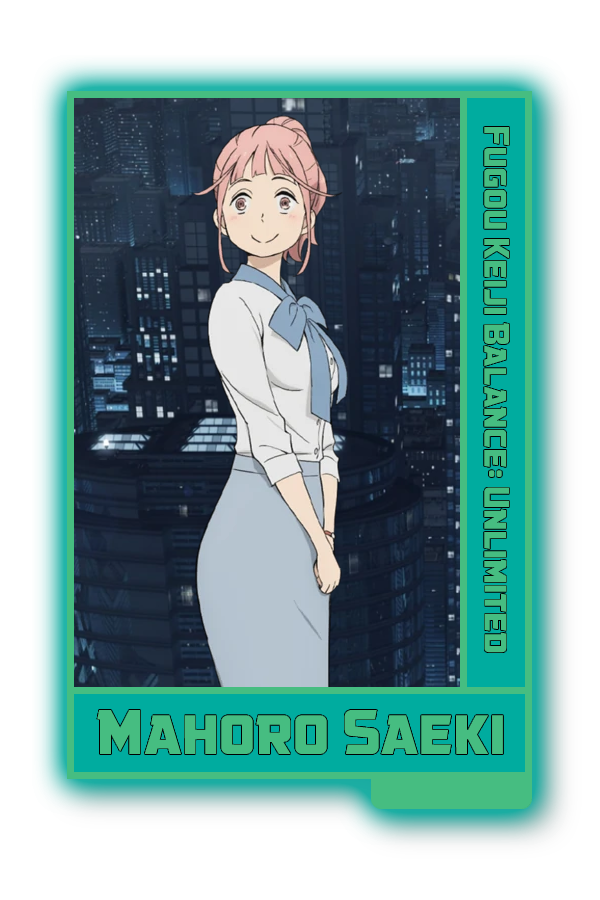
<style>
.page{position:relative;width:600px;height:900px;background:#ffffff}
.page>*{position:absolute;margin:0}
.t1{font:37.3px "GovernmentAgentBB";color:#46bd81}
.t2{font:65.8px "GovernmentAgentBB";color:#46bd81}
</style>
<div class="page">
<p class="t1" style="left:484px;top:127px;width:26px;height:526px;rotate:90deg">Fugou Keiji Balance: Unlimited</p>
<p class="t2" style="left:97px;top:710px;width:406px;height:44px">Mahoro Saeki</p>
</div>
